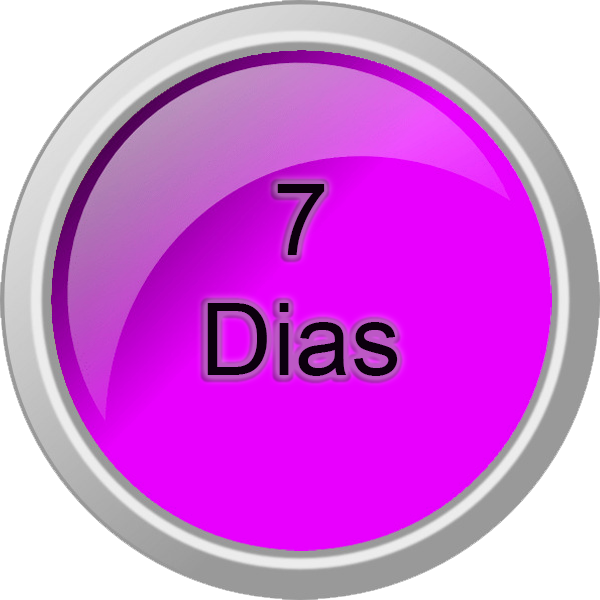
<style>
.page{position:relative;width:600px;height:600px;background:#e800fe}
.page>*{position:absolute;margin:0}
.t1{font:100px "ArialMT";color:#000000}
.t2{font:8px "ArialMT";color:#000000}
</style>
<div class="page">
<p class="t1" style="left:207px;top:184px;width:191px;height:192px;text-align:center"><span class="t2"><br></span>7<br>Dias</p>
</div>
